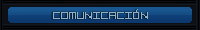
<style>
.page{position:relative;width:200px;height:30px}
.page>*{position:absolute;margin:0}
.t1{font:18.1px "VisitorTT2BRK";color:#91b0c4}
</style>
<div class="page">
<p class="t1" style="left:53px;top:9px;width:95px;height:10px">COmUNICACIÓN</p>
</div>
